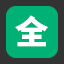
<style>
.page{position:relative;width:64px;height:64px;background:#00b175}
.page>*{position:absolute;margin:0}
.t1{font:33.3px "SourceHanSansCN-Heavy";color:#ffffff}
</style>
<div class="page">
<p class="t1" style="left:15px;top:15px;width:33px;height:32px">全</p>
</div>
